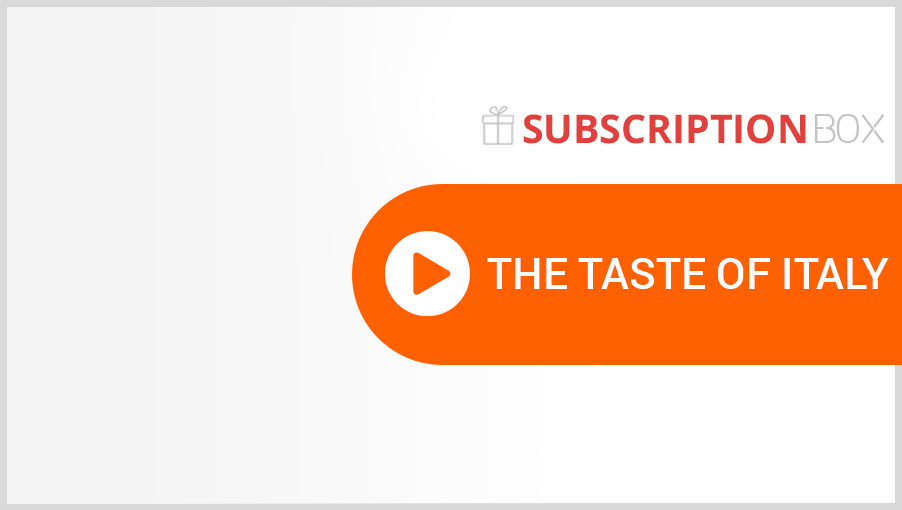
<style>
.page{position:relative;width:902px;height:510px;background:#ffffff}
.page>*{position:absolute;margin:0}
.t1{font:43px "Roboto-Medium";color:#ffffff;text-transform:uppercase}
</style>
<div class="page">
<p class="t1" style="left:487px;top:258px;width:402px;height:31px">The Taste Of Italy</p>
</div>
